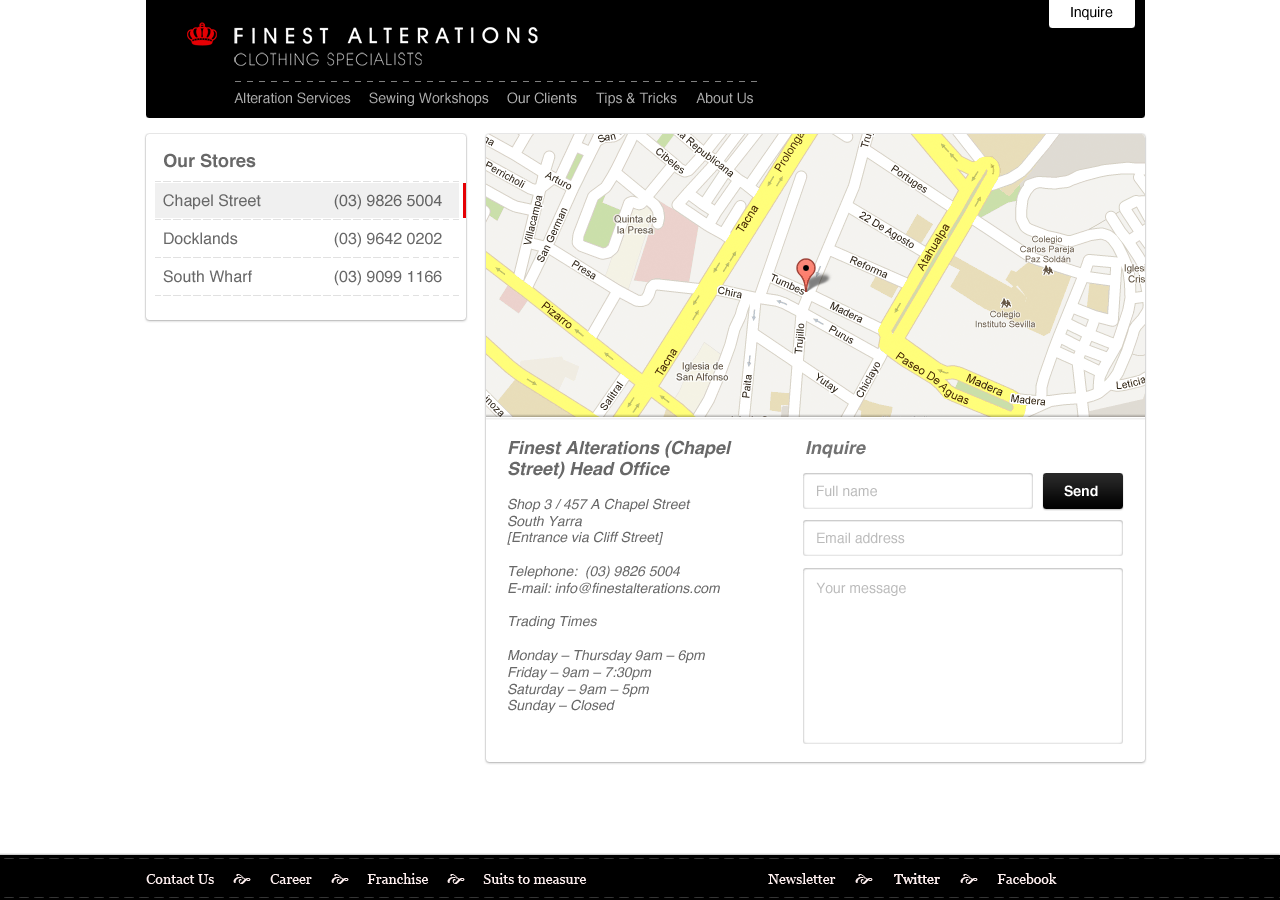
<style>
.page{position:relative;width:1280px;height:900px;background:#ffffff}
.page>*{position:absolute;margin:0}
.t1{font:14px "Helvetica";color:#000000}
.t2{font:18px "Helvetica-Bold";color:#686868}
.t3{font:16px "Helvetica";color:#686868}
.t4{font:16px "Helvetica";color:#646464}
.t5{font:14px "Helvetica-Oblique";color:#686868}
.t6{font:18px "Helvetica-BoldOblique";color:#686868}
.t7{font:18px "Helvetica-BoldOblique";color:#727272}
.t8{font:14px "Helvetica";color:#bbbbbb}
.t9{font:14px "Helvetica-Bold";color:#ffffff}
.t10{font:14px "Georgia";color:#fff0f0}
</style>
<div class="page">
<p class="t1" style="left:1071px;top:6px;width:42px;height:14px">Inquire</p>
<p class="t2" style="left:164px;top:153px;width:92px;height:15px">Our Stores</p>
<p class="t3" style="left:163px;top:194px;width:279px;height:92px">Chapel Street         <span class="t4">(03) 9826 5004<br></span><br>Docklands         (03) 9642 0202<br><br>South Wharf         (03) 9099 1166</p>
<p class="t5" style="left:507px;top:440px;width:225px;height:273px"><span class="t6">Finest Alterations (Chapel Street) Head Office<br></span><br>Shop 3 / 457 A Chapel Street<br>South Yarra<br>[Entrance via Cliff Street]<br><br>Telephone:  (03) 9826 5004<br>E-mail: info@finestalterations.com<br><br>Trading Times<br><br>Monday – Thursday 9am – 6pm<br>Friday – 9am – 7:30pm<br>Saturday – 9am – 5pm<br>Sunday – Closed</p>
<p class="t7" style="left:806px;top:441px;width:60px;height:17px">Inquire</p>
<p class="t8" style="left:817px;top:485px;width:60px;height:12px">Full name</p>
<p class="t9" style="left:1064px;top:485px;width:34px;height:12px">Send</p>
<p class="t8" style="left:817px;top:532px;width:88px;height:12px">Email address</p>
<p class="t8" style="left:816px;top:582px;width:90px;height:14px">Your message</p>
<p class="t10" style="left:146px;top:874px;width:68px;height:10px">Contact Us</p>
<p class="t10" style="left:270px;top:874px;width:42px;height:10px">Career</p>
<p class="t10" style="left:367px;top:873px;width:62px;height:11px">Franchise</p>
<p class="t10" style="left:483px;top:873px;width:104px;height:11px">Suits to measure</p>
<p class="t10" style="left:768px;top:873px;width:68px;height:11px">Newsletter</p>
<p class="t10" style="left:894px;top:873px;width:46px;height:11px">Twitter</p>
<p class="t10" style="left:894px;top:873px;width:46px;height:11px">Twitter</p>
<p class="t10" style="left:997px;top:873px;width:60px;height:11px">Facebook</p>
</div>
